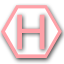
<style>
.page{position:relative;width:64px;height:64px;background:#ffffff}
.page>*{position:absolute;margin:0}
.t1{font:48px "ArialMT";color:#ffa1a8}
</style>
<div class="page">
<p class="t1" style="left:17px;top:14px;width:28px;height:36px">H</p>
</div>
